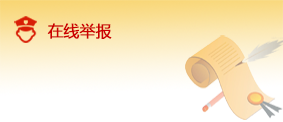
<style>
.page{position:relative;width:283px;height:122px;background:#ffffff}
.page>*{position:absolute;margin:0}
.t1{font:15.8px "MicrosoftYaHei";letter-spacing:0.005em;color:#cc0000;font-weight:bold}
</style>
<div class="page">
<p class="t1" style="left:47px;top:23px;width:65px;height:16px">在线举报</p>
</div>
